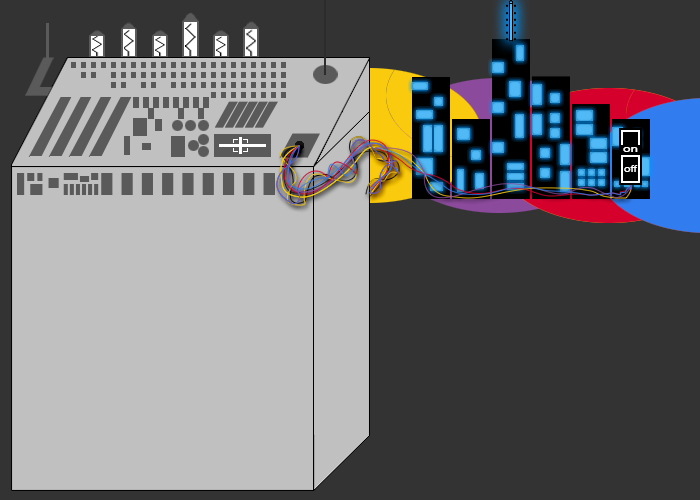
<style>
.page{position:relative;width:700px;height:500px;background:#333333}
.page>*{position:absolute;margin:0}
.t1{font:10.8px "Raavi";color:#ffffff;scale:1.39 1}
.t2{font:11.5px "Raavi";color:#ffffff;scale:1.11 1}
</style>
<div class="page">
<p class="t1" style="left:623px;top:147px;width:15px;height:5px">on</p>
<p class="t2" style="left:624px;top:165px;width:14px;height:7px">off</p>
</div>
